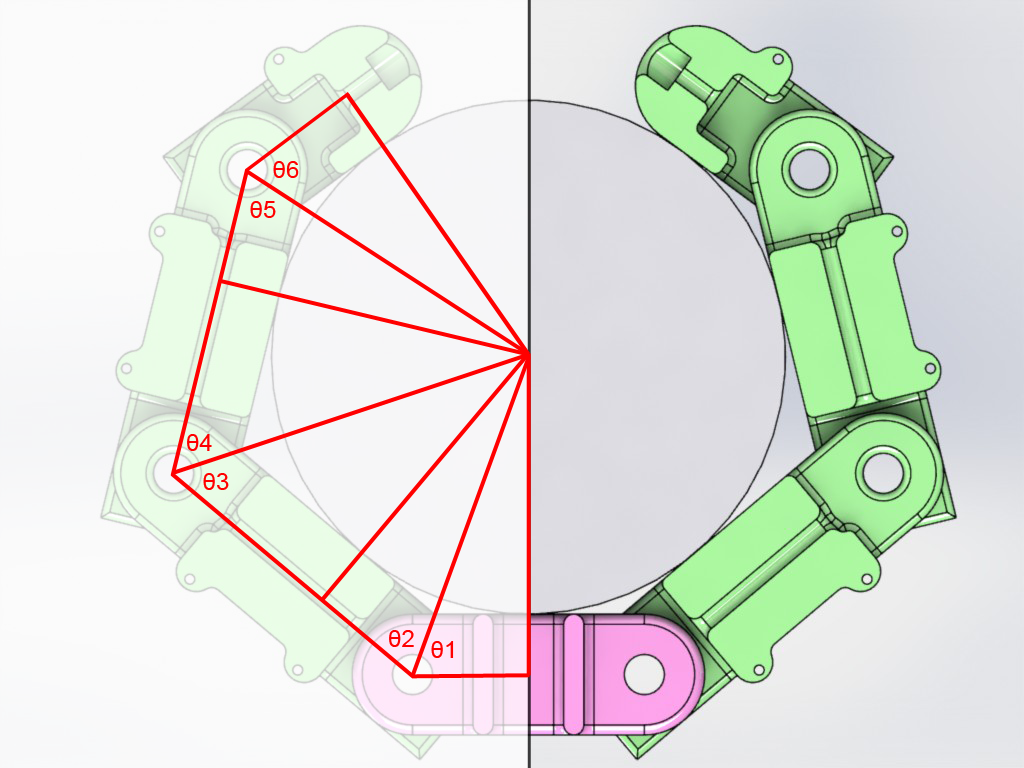
<style>
.page{position:relative;width:1024px;height:768px}
.page>*{position:absolute;margin:0}
.t1{font:24px "ArialMT";color:#ff0000}
</style>
<div class="page">
<p class="t1" style="left:273px;top:161px;width:26px;height:17px">θ6</p>
<p class="t1" style="left:250px;top:201px;width:26px;height:17px">θ5</p>
<p class="t1" style="left:187px;top:434px;width:25px;height:17px">θ4</p>
<p class="t1" style="left:203px;top:473px;width:26px;height:17px">θ3</p>
<p class="t1" style="left:389px;top:630px;width:25px;height:17px">θ2</p>
<p class="t1" style="left:431px;top:641px;width:23px;height:17px">θ1</p>
</div>
